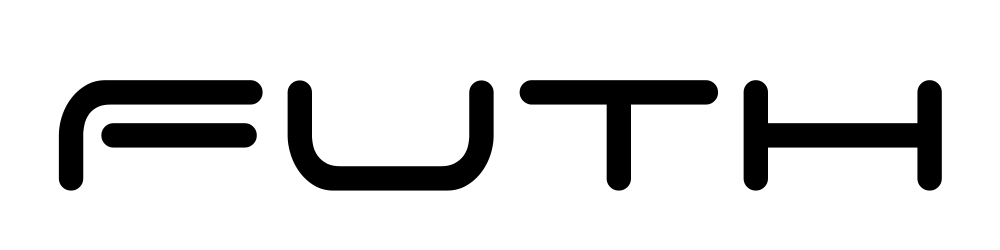
<style>
.page{position:relative;width:1000px;height:250px;background:#ffffff}
.page>*{position:absolute;margin:0}
.t1{font:253.4px "SpaceAge";color:#000000}
</style>
<div class="page">
<p class="t1" style="left:58px;top:80px;width:884px;height:111px">Futh</p>
</div>
